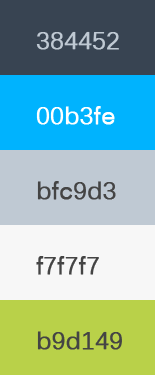
<style>
.page{position:relative;width:155px;height:375px}
.page>*{position:absolute;margin:0}
.t1{font:24px "Kalinga";color:#bfc9d3;font-weight:bold}
.t2{font:24px "Kalinga";color:#ffffff;font-weight:bold}
.t3{font:24px "Kalinga";color:#444444;font-weight:bold}
</style>
<div class="page">
<p class="t1" style="left:36px;top:31px;width:83px;height:19px">384452</p>
<p class="t2" style="left:36px;top:106px;width:79px;height:19px">00b3fe</p>
<p class="t3" style="left:37px;top:181px;width:79px;height:19px">bfc9d3</p>
<p class="t3" style="left:36px;top:256px;width:63px;height:19px">f7f7f7</p>
<p class="t3" style="left:37px;top:331px;width:85px;height:19px">b9d149</p>
</div>
